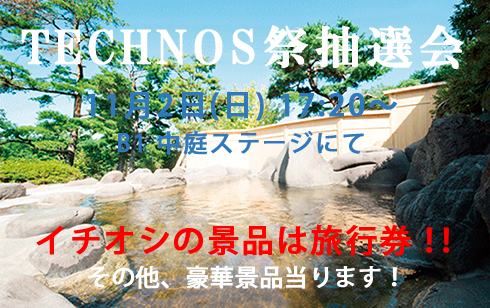
<style>
.page{position:relative;width:490px;height:308px}
.page>*{position:absolute;margin:0}
.t1{font:46px "HGSMinchoE";letter-spacing:0.1em;color:#ffffff;font-weight:bold}
.t2{font:30px/36px "KozGoPr6N-Medium";letter-spacing:0.075em;color:#3079bd;font-weight:bold}
.t3{font:24px/36px "KozGoPr6N-Medium";letter-spacing:0.075em;color:#3079bd;font-weight:bold}
.t4{font:32px "KozGoPr6N-Medium";letter-spacing:0.05em;color:#ff0000;font-weight:bold}
.t5{font:32px "KozGoPr6N-Medium";letter-spacing:-0.5em;color:#ff0000;font-weight:bold}
.t6{font:32px "KozGoPr6N-Medium";letter-spacing:0.01em;color:#ff0000;font-weight:bold}
.t7{font:24px "KozGoPr6N-Medium";color:#ffffff;font-weight:bold}
</style>
<div class="page">
<p class="t1" style="left:21px;top:25px;width:443px;height:44px">TECHNOS祭抽選会</p>
<p class="t2" style="left:86px;top:92px;width:311px;height:63px;text-align:center">11月2日(日) 17:20〜<br><span class="t3">B1 中庭ステージにて</span></p>
<p class="t4" style="left:36px;top:225px;width:414px;height:31px">イチオシの景品は旅行券<span class="t5">！</span><span class="t6">！</span></p>
<p class="t7" style="left:88px;top:265px;width:309px;height:24px">その他、豪華景品当ります！</p>
</div>
